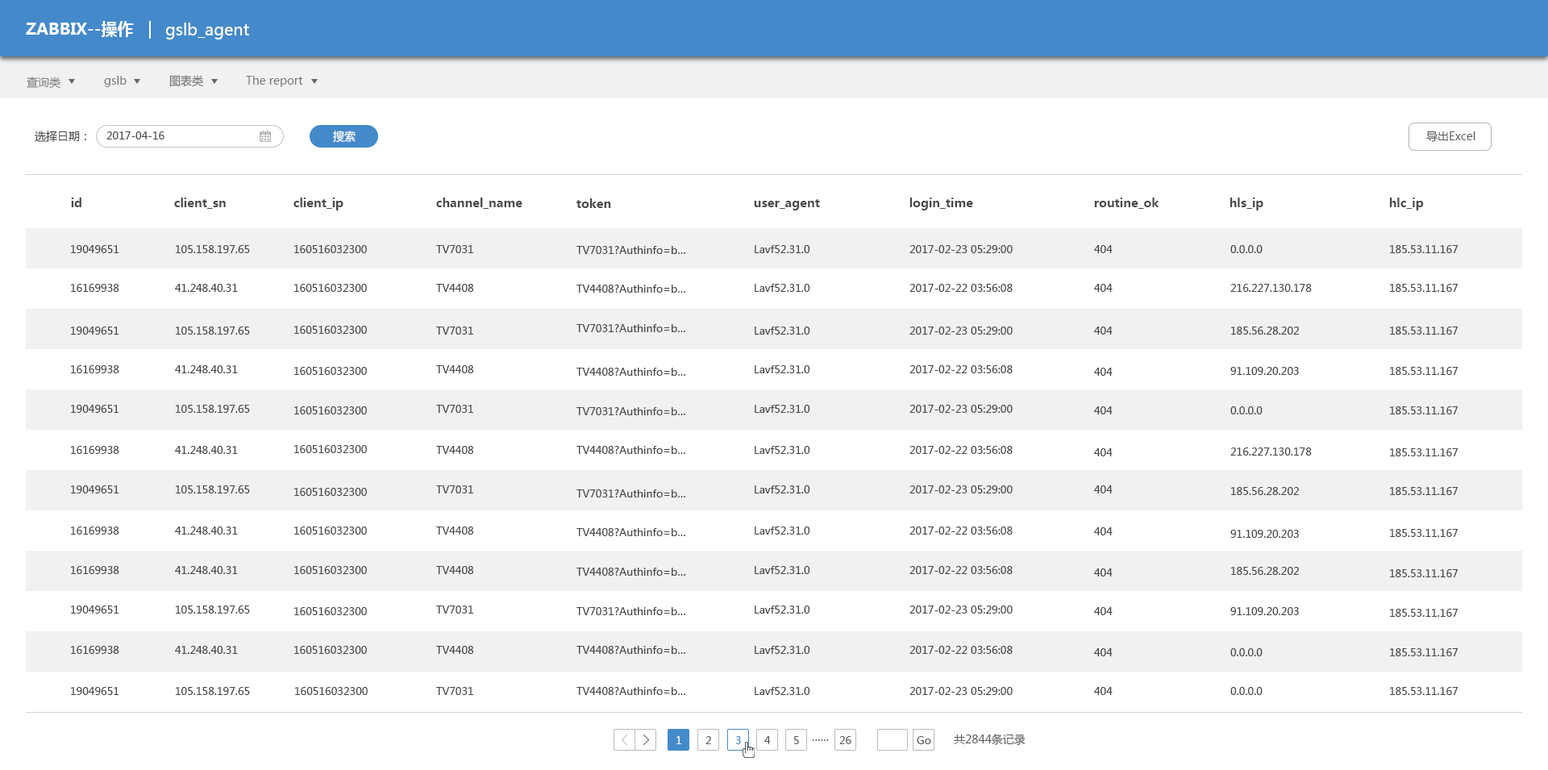
<style>
.page{position:relative;width:1548px;height:770px;background:#ffffff}
.page>*{position:absolute;margin:0}
.t1{font:16.1px "MicrosoftYaHei-Bold";color:#ffffff}
.t2{font:16.1px "MicrosoftYaHei";color:#ffffff}
.t3{font:11.3px "MicrosoftYaHei";color:#828282}
.t4{font:11.3px "MicrosoftYaHei";color:#747474}
.t5{font:11.3px "MicrosoftYaHei";color:#4a4a4a}
.t6{font:10.5px "MicrosoftYaHei";color:#4a4a4a}
.t7{font:11.3px "MicrosoftYaHei";color:#ffffff}
.t8{font:11.3px "MicrosoftYaHei";color:#5c5c5c}
.t9{font:12.1px "MicrosoftYaHei-Bold";color:#4a4a4a}
.t10{font:10.5px "MicrosoftYaHei";color:#464646}
.t11{font:10.5px "MicrosoftYaHei";color:#ffffff}
.t12{font:10.5px "MicrosoftYaHei";color:#5b5b5b}
.t13{font:10.5px "MicrosoftYaHei";color:#448aca}
.t14{font:11.3px "MicrosoftYaHei";color:#5b5b5b}
</style>
<div class="page">
<p class="t1" style="left:26px;top:21px;width:108px;height:16px">ZABBIX--操作</p>
<p class="t2" style="left:165px;top:23px;width:84px;height:17px">gslb_agent</p>
<p class="t3" style="left:27px;top:77px;width:33px;height:12px">查询类</p>
<p class="t4" style="left:104px;top:76px;width:23px;height:11px">gslb</p>
<p class="t4" style="left:169px;top:75px;width:34px;height:12px">图表类</p>
<p class="t4" style="left:246px;top:76px;width:57px;height:11px">The report</p>
<p class="t5" style="left:35px;top:131px;width:51px;height:11px">选择日期：</p>
<p class="t6" style="left:106px;top:131px;width:59px;height:9px">2017-04-16</p>
<p class="t7" style="left:333px;top:131px;width:23px;height:12px">搜索</p>
<p class="t8" style="left:1427px;top:131px;width:49px;height:11px">导出Excel</p>
<p class="t9" style="left:71px;top:198px;width:10px;height:9px">id</p>
<p class="t9" style="left:174px;top:198px;width:52px;height:11px">client_sn</p>
<p class="t9" style="left:294px;top:198px;width:50px;height:12px">client_ip</p>
<p class="t9" style="left:436px;top:198px;width:87px;height:11px">channel_name</p>
<p class="t9" style="left:910px;top:198px;width:63px;height:12px">login_time</p>
<p class="t9" style="left:1094px;top:198px;width:66px;height:11px">routine_ok</p>
<p class="t9" style="left:1230px;top:198px;width:34px;height:12px">hls_ip</p>
<p class="t9" style="left:1389px;top:198px;width:35px;height:12px">hlc_ip</p>
<p class="t9" style="left:577px;top:198px;width:34px;height:10px">token</p>
<p class="t9" style="left:754px;top:199px;width:66px;height:11px">user_agent</p>
<p class="t10" style="left:71px;top:245px;width:48px;height:8px">19049651</p>
<p class="t10" style="left:176px;top:245px;width:74px;height:8px">105.158.197.65</p>
<p class="t10" style="left:294px;top:245px;width:73px;height:8px">160516032300</p>
<p class="t10" style="left:436px;top:245px;width:37px;height:8px">TV7031</p>
<p class="t10" style="left:577px;top:246px;width:108px;height:8px">TV7031?Authinfo=b…</p>
<p class="t10" style="left:755px;top:245px;width:55px;height:8px">Lavf52.31.0</p>
<p class="t10" style="left:910px;top:245px;width:103px;height:8px">2017-02-23 05:29:00</p>
<p class="t10" style="left:1094px;top:245px;width:19px;height:8px">404</p>
<p class="t10" style="left:1231px;top:245px;width:32px;height:8px">0.0.0.0</p>
<p class="t10" style="left:1390px;top:245px;width:69px;height:8px">185.53.11.167</p>
<p class="t10" style="left:71px;top:284px;width:48px;height:8px">16169938</p>
<p class="t10" style="left:175px;top:284px;width:63px;height:8px">41.248.40.31</p>
<p class="t10" style="left:294px;top:284px;width:73px;height:8px">160516032300</p>
<p class="t10" style="left:436px;top:284px;width:38px;height:8px">TV4408</p>
<p class="t10" style="left:577px;top:285px;width:108px;height:8px">TV4408?Authinfo=b…</p>
<p class="t10" style="left:755px;top:284px;width:55px;height:8px">Lavf52.31.0</p>
<p class="t10" style="left:910px;top:284px;width:103px;height:8px">2017-02-22 03:56:08</p>
<p class="t10" style="left:1094px;top:284px;width:19px;height:8px">404</p>
<p class="t10" style="left:1231px;top:284px;width:81px;height:8px">216.227.130.178</p>
<p class="t10" style="left:1390px;top:284px;width:69px;height:8px">185.53.11.167</p>
<p class="t10" style="left:71px;top:327px;width:48px;height:8px">19049651</p>
<p class="t10" style="left:176px;top:327px;width:74px;height:8px">105.158.197.65</p>
<p class="t10" style="left:294px;top:326px;width:73px;height:8px">160516032300</p>
<p class="t10" style="left:436px;top:327px;width:37px;height:8px">TV7031</p>
<p class="t10" style="left:577px;top:324px;width:108px;height:8px">TV7031?Authinfo=b…</p>
<p class="t10" style="left:755px;top:327px;width:55px;height:8px">Lavf52.31.0</p>
<p class="t10" style="left:910px;top:327px;width:103px;height:8px">2017-02-23 05:29:00</p>
<p class="t10" style="left:1094px;top:327px;width:19px;height:8px">404</p>
<p class="t10" style="left:1231px;top:327px;width:68px;height:8px">185.56.28.202</p>
<p class="t10" style="left:1390px;top:327px;width:69px;height:8px">185.53.11.167</p>
<p class="t10" style="left:71px;top:365px;width:48px;height:8px">16169938</p>
<p class="t10" style="left:175px;top:365px;width:63px;height:8px">41.248.40.31</p>
<p class="t10" style="left:436px;top:365px;width:38px;height:8px">TV4408</p>
<p class="t10" style="left:755px;top:365px;width:55px;height:8px">Lavf52.31.0</p>
<p class="t10" style="left:910px;top:365px;width:103px;height:8px">2017-02-22 03:56:08</p>
<p class="t10" style="left:294px;top:367px;width:73px;height:8px">160516032300</p>
<p class="t10" style="left:577px;top:368px;width:108px;height:8px">TV4408?Authinfo=b…</p>
<p class="t10" style="left:1094px;top:368px;width:19px;height:8px">404</p>
<p class="t10" style="left:1231px;top:367px;width:68px;height:8px">91.109.20.203</p>
<p class="t10" style="left:1390px;top:367px;width:69px;height:8px">185.53.11.167</p>
<p class="t10" style="left:71px;top:405px;width:48px;height:8px">19049651</p>
<p class="t10" style="left:176px;top:405px;width:74px;height:8px">105.158.197.65</p>
<p class="t10" style="left:294px;top:406px;width:73px;height:9px">160516032300</p>
<p class="t10" style="left:436px;top:405px;width:37px;height:8px">TV7031</p>
<p class="t10" style="left:577px;top:407px;width:108px;height:8px">TV7031?Authinfo=b…</p>
<p class="t10" style="left:755px;top:405px;width:55px;height:8px">Lavf52.31.0</p>
<p class="t10" style="left:910px;top:405px;width:103px;height:8px">2017-02-23 05:29:00</p>
<p class="t10" style="left:1094px;top:406px;width:19px;height:9px">404</p>
<p class="t10" style="left:1231px;top:406px;width:32px;height:9px">0.0.0.0</p>
<p class="t10" style="left:1390px;top:406px;width:69px;height:9px">185.53.11.167</p>
<p class="t10" style="left:71px;top:446px;width:48px;height:8px">16169938</p>
<p class="t10" style="left:175px;top:446px;width:63px;height:8px">41.248.40.31</p>
<p class="t10" style="left:294px;top:445px;width:73px;height:8px">160516032300</p>
<p class="t10" style="left:436px;top:446px;width:38px;height:8px">TV4408</p>
<p class="t10" style="left:577px;top:446px;width:108px;height:8px">TV4408?Authinfo=b…</p>
<p class="t10" style="left:755px;top:446px;width:55px;height:8px">Lavf52.31.0</p>
<p class="t10" style="left:910px;top:446px;width:103px;height:8px">2017-02-22 03:56:08</p>
<p class="t10" style="left:1094px;top:448px;width:19px;height:8px">404</p>
<p class="t10" style="left:1231px;top:448px;width:81px;height:8px">216.227.130.178</p>
<p class="t10" style="left:1390px;top:448px;width:69px;height:8px">185.53.11.167</p>
<p class="t10" style="left:71px;top:485px;width:48px;height:9px">19049651</p>
<p class="t10" style="left:176px;top:485px;width:74px;height:9px">105.158.197.65</p>
<p class="t10" style="left:436px;top:485px;width:37px;height:9px">TV7031</p>
<p class="t10" style="left:755px;top:485px;width:55px;height:9px">Lavf52.31.0</p>
<p class="t10" style="left:910px;top:485px;width:103px;height:9px">2017-02-23 05:29:00</p>
<p class="t10" style="left:1094px;top:485px;width:19px;height:9px">404</p>
<p class="t10" style="left:294px;top:488px;width:73px;height:8px">160516032300</p>
<p class="t10" style="left:577px;top:490px;width:108px;height:8px">TV7031?Authinfo=b…</p>
<p class="t10" style="left:1231px;top:487px;width:68px;height:8px">185.56.28.202</p>
<p class="t10" style="left:1390px;top:487px;width:69px;height:8px">185.53.11.167</p>
<p class="t10" style="left:71px;top:527px;width:48px;height:8px">16169938</p>
<p class="t10" style="left:175px;top:527px;width:63px;height:8px">41.248.40.31</p>
<p class="t10" style="left:294px;top:527px;width:73px;height:8px">160516032300</p>
<p class="t10" style="left:436px;top:527px;width:38px;height:8px">TV4408</p>
<p class="t10" style="left:577px;top:528px;width:108px;height:8px">TV4408?Authinfo=b…</p>
<p class="t10" style="left:755px;top:527px;width:55px;height:8px">Lavf52.31.0</p>
<p class="t10" style="left:910px;top:527px;width:103px;height:8px">2017-02-22 03:56:08</p>
<p class="t10" style="left:1094px;top:527px;width:19px;height:8px">404</p>
<p class="t10" style="left:1231px;top:530px;width:68px;height:8px">91.109.20.203</p>
<p class="t10" style="left:1390px;top:529px;width:69px;height:8px">185.53.11.167</p>
<p class="t10" style="left:71px;top:566px;width:48px;height:8px">16169938</p>
<p class="t10" style="left:175px;top:566px;width:63px;height:8px">41.248.40.31</p>
<p class="t10" style="left:294px;top:566px;width:73px;height:8px">160516032300</p>
<p class="t10" style="left:436px;top:566px;width:38px;height:8px">TV4408</p>
<p class="t10" style="left:577px;top:568px;width:108px;height:8px">TV4408?Authinfo=b…</p>
<p class="t10" style="left:755px;top:566px;width:55px;height:8px">Lavf52.31.0</p>
<p class="t10" style="left:910px;top:566px;width:103px;height:8px">2017-02-22 03:56:08</p>
<p class="t10" style="left:1094px;top:569px;width:19px;height:8px">404</p>
<p class="t10" style="left:1231px;top:567px;width:68px;height:8px">185.56.28.202</p>
<p class="t10" style="left:1390px;top:569px;width:69px;height:8px">185.53.11.167</p>
<p class="t10" style="left:71px;top:606px;width:48px;height:8px">19049651</p>
<p class="t10" style="left:176px;top:606px;width:74px;height:8px">105.158.197.65</p>
<p class="t10" style="left:436px;top:606px;width:37px;height:8px">TV7031</p>
<p class="t10" style="left:755px;top:606px;width:55px;height:8px">Lavf52.31.0</p>
<p class="t10" style="left:910px;top:606px;width:103px;height:8px">2017-02-23 05:29:00</p>
<p class="t10" style="left:294px;top:607px;width:73px;height:8px">160516032300</p>
<p class="t10" style="left:577px;top:607px;width:108px;height:8px">TV7031?Authinfo=b…</p>
<p class="t10" style="left:1094px;top:607px;width:19px;height:8px">404</p>
<p class="t10" style="left:1231px;top:607px;width:68px;height:8px">91.109.20.203</p>
<p class="t10" style="left:1390px;top:609px;width:69px;height:8px">185.53.11.167</p>
<p class="t10" style="left:71px;top:646px;width:48px;height:8px">16169938</p>
<p class="t10" style="left:175px;top:646px;width:63px;height:8px">41.248.40.31</p>
<p class="t10" style="left:294px;top:646px;width:73px;height:8px">160516032300</p>
<p class="t10" style="left:436px;top:646px;width:38px;height:8px">TV4408</p>
<p class="t10" style="left:577px;top:646px;width:108px;height:8px">TV4408?Authinfo=b…</p>
<p class="t10" style="left:755px;top:646px;width:55px;height:8px">Lavf52.31.0</p>
<p class="t10" style="left:910px;top:646px;width:103px;height:8px">2017-02-22 03:56:08</p>
<p class="t10" style="left:1094px;top:648px;width:19px;height:8px">404</p>
<p class="t10" style="left:1231px;top:648px;width:32px;height:8px">0.0.0.0</p>
<p class="t10" style="left:1390px;top:648px;width:69px;height:8px">185.53.11.167</p>
<p class="t10" style="left:71px;top:687px;width:48px;height:8px">19049651</p>
<p class="t10" style="left:176px;top:687px;width:74px;height:8px">105.158.197.65</p>
<p class="t10" style="left:295px;top:687px;width:73px;height:8px">160516032300</p>
<p class="t10" style="left:436px;top:687px;width:37px;height:8px">TV7031</p>
<p class="t10" style="left:577px;top:687px;width:108px;height:8px">TV4408?Authinfo=b…</p>
<p class="t10" style="left:755px;top:687px;width:55px;height:8px">Lavf52.31.0</p>
<p class="t10" style="left:910px;top:687px;width:103px;height:8px">2017-02-23 05:29:00</p>
<p class="t10" style="left:1094px;top:687px;width:19px;height:8px">404</p>
<p class="t10" style="left:1231px;top:687px;width:32px;height:8px">0.0.0.0</p>
<p class="t10" style="left:1390px;top:687px;width:69px;height:8px">185.53.11.167</p>
<p class="t11" style="left:677px;top:736px;width:4px;height:8px">1</p>
<p class="t12" style="left:706px;top:736px;width:5px;height:8px">2</p>
<p class="t13" style="left:735px;top:736px;width:6px;height:8px">3</p>
<p class="t12" style="left:764px;top:736px;width:7px;height:8px">4</p>
<p class="t12" style="left:794px;top:736px;width:5px;height:8px">5</p>
<p class="t12" style="left:839px;top:736px;width:13px;height:8px">26</p>
<p class="t12" style="left:917px;top:736px;width:14px;height:8px">Go</p>
<p class="t14" style="left:954px;top:734px;width:72px;height:11px">共2844条记录</p>
<p class="t12" style="left:812px;top:739px;width:17px;height:2px">……</p>
</div>
